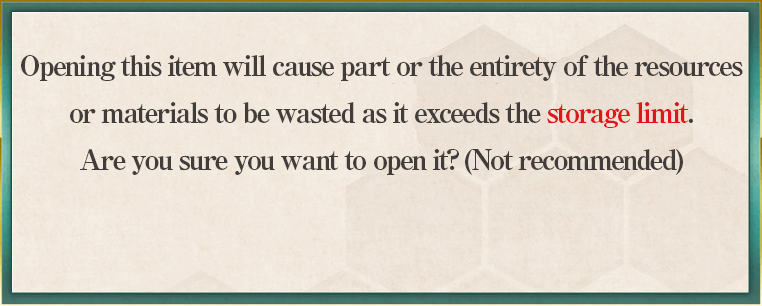
<style>
.page{position:relative;width:762px;height:306px}
.page>*{position:absolute;margin:0}
.t1{font:28px/47px "RyuminPro-ExBold";letter-spacing:-0.08em;color:#423c3a}
.t2{font:28px/47px "RyuminPro-ExBold";letter-spacing:-0.08em;color:#df171a}
</style>
<div class="page">
<p class="t1" style="left:21px;top:55px;width:722px;height:120px;text-align:center">Opening this item will cause part or the entirety of the resources<br>or materials to be wasted as it exceeds the <span class="t2">storage limit</span>.<br>Are you sure you want to open it? (Not recommended)</p>
</div>
